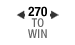
<style>
.page{position:relative;width:75px;height:45px;background:#ffffff}
.page>*{position:absolute;margin:0}
.t1{font:13px/11px "HelveticaNeueLTCom-BdCn";letter-spacing:0.015em;color:#010101}
.t2{font:12px/11px "HelveticaNeueLTCom-MdCn";letter-spacing:0.015em;color:#666666}
.t3{font:12px/11px "HelveticaNeueLTCom-MdCn";letter-spacing:0.03em;color:#666666}
</style>
<div class="page">
<p class="t1" style="left:28px;top:6px;width:19px;height:32px;text-align:center">270<br><span class="t2">TO<br></span><span class="t3">WI</span><span class="t2">N</span></p>
</div>
